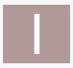
<style>
.page{position:relative;width:73px;height:68px;background:#b19999}
.page>*{position:absolute;margin:0}
.t1{font:60px "GillSansMT-Condensed";letter-spacing:0.2em;color:#ffffff}
</style>
<div class="page">
<p class="t1" style="left:34px;top:14px;width:6px;height:40px">1</p>
</div>
